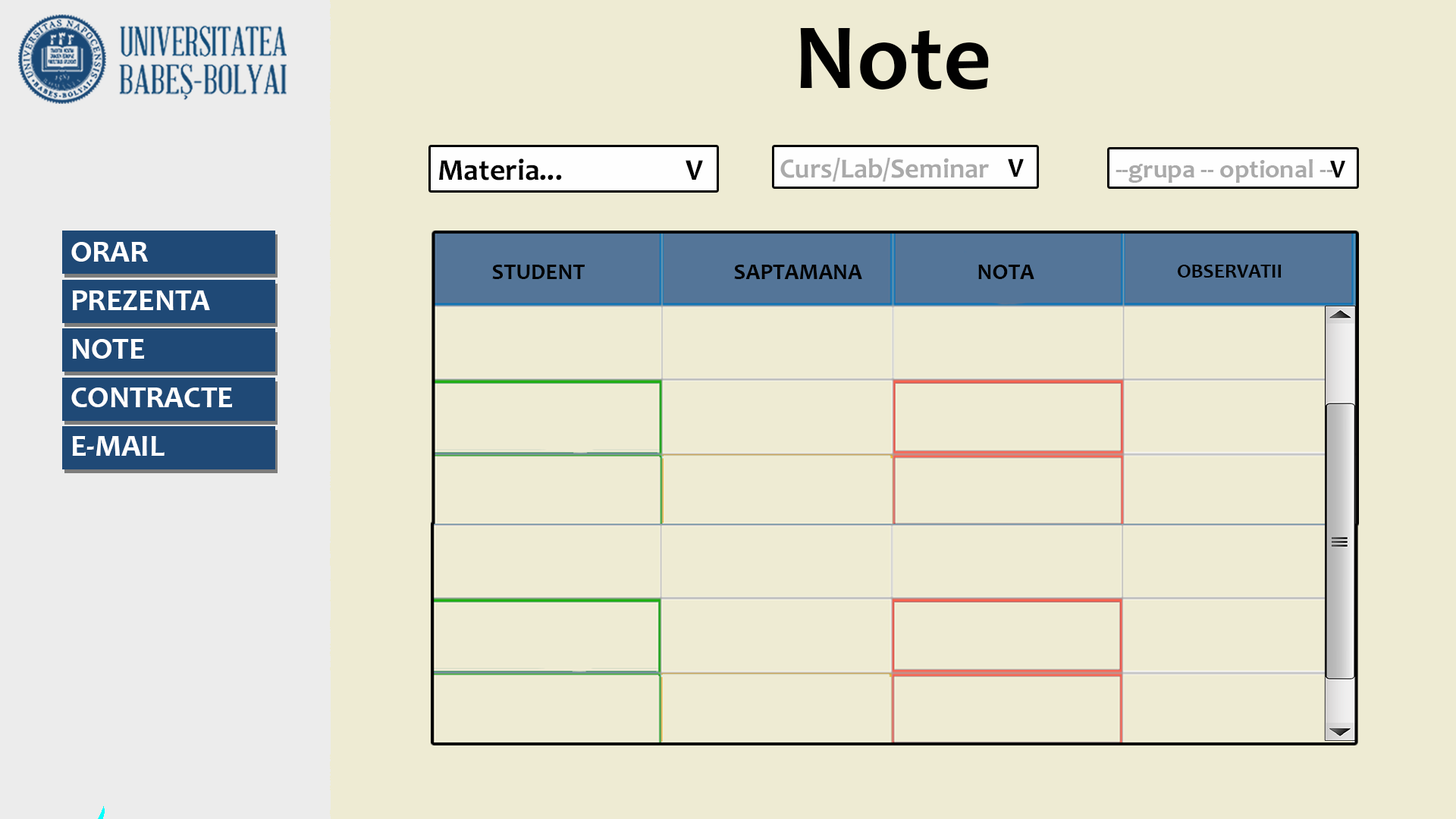
<style>
.page{position:relative;width:1456px;height:819px;background:#eeebd3}
.page>*{position:absolute;margin:0}
.t1{font:94.3px "Candara-Bold";color:#000000}
.t2{font:30.4px "Candara-Bold";color:#000000}
.t3{font:27.8px "Candara-Bold";color:#aaaaaa}
.t4{font:27.8px "Candara-Bold";color:#000000}
.t5{font:26.2px "Candara-Bold";color:#aaaaaa}
.t6{font:26.2px "Candara-Bold";color:#000000}
.t7{font:30px/48.4px "Candara-Bold";color:#ffffff;scale:1.03 1}
.t8{font:22.8px "Candara-Bold";color:#000000}
.t9{font:20.4px "Candara-Bold";color:#000000}
</style>
<div class="page">
<p class="t1" style="left:800px;top:28px;width:189px;height:61px">Note</p>
<p class="t2" style="left:439px;top:158px;width:123px;height:22px">Materia...</p>
<p class="t2" style="left:686px;top:160px;width:17px;height:20px">V</p>
<p class="t3" style="left:780px;top:158px;width:209px;height:24px">Curs/Lab/Seminar</p>
<p class="t4" style="left:1008px;top:158px;width:16px;height:19px">V</p>
<p class="t5" style="left:1115px;top:159px;width:218px;height:24px">--grupa -- optional --</p>
<p class="t6" style="left:1330px;top:161px;width:15px;height:16px">V</p>
<p class="t7" style="left:71px;top:242px;width:162px;height:214px">ORAR<br>PREZENTA<br>NOTE<br>CONTRACTE<br>E-MAIL</p>
<p class="t8" style="left:492px;top:265px;width:93px;height:14px">STUDENT</p>
<p class="t8" style="left:734px;top:265px;width:128px;height:14px">SAPTAMANA</p>
<p class="t8" style="left:978px;top:265px;width:56px;height:14px">NOTA</p>
<p class="t9" style="left:1178px;top:265px;width:104px;height:13px">OBSERVATII</p>
</div>
